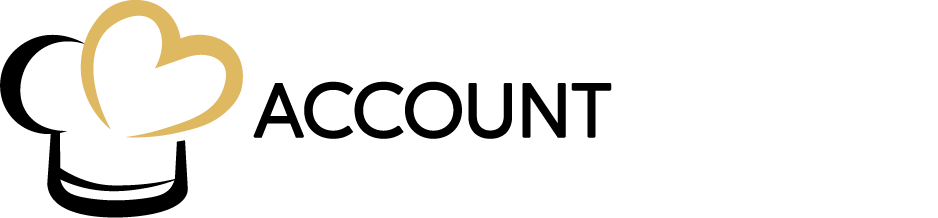
<style>
.page{position:relative;width:938px;height:218px;background:#ffffff}
.page>*{position:absolute;margin:0}
.t1{font:75px "GTEestiDisplayTrial-Lt";color:#000000;font-weight:bold}
</style>
<div class="page">
<p class="t1" style="left:253px;top:81px;width:359px;height:58px">ACCOUNT</p>
</div>
